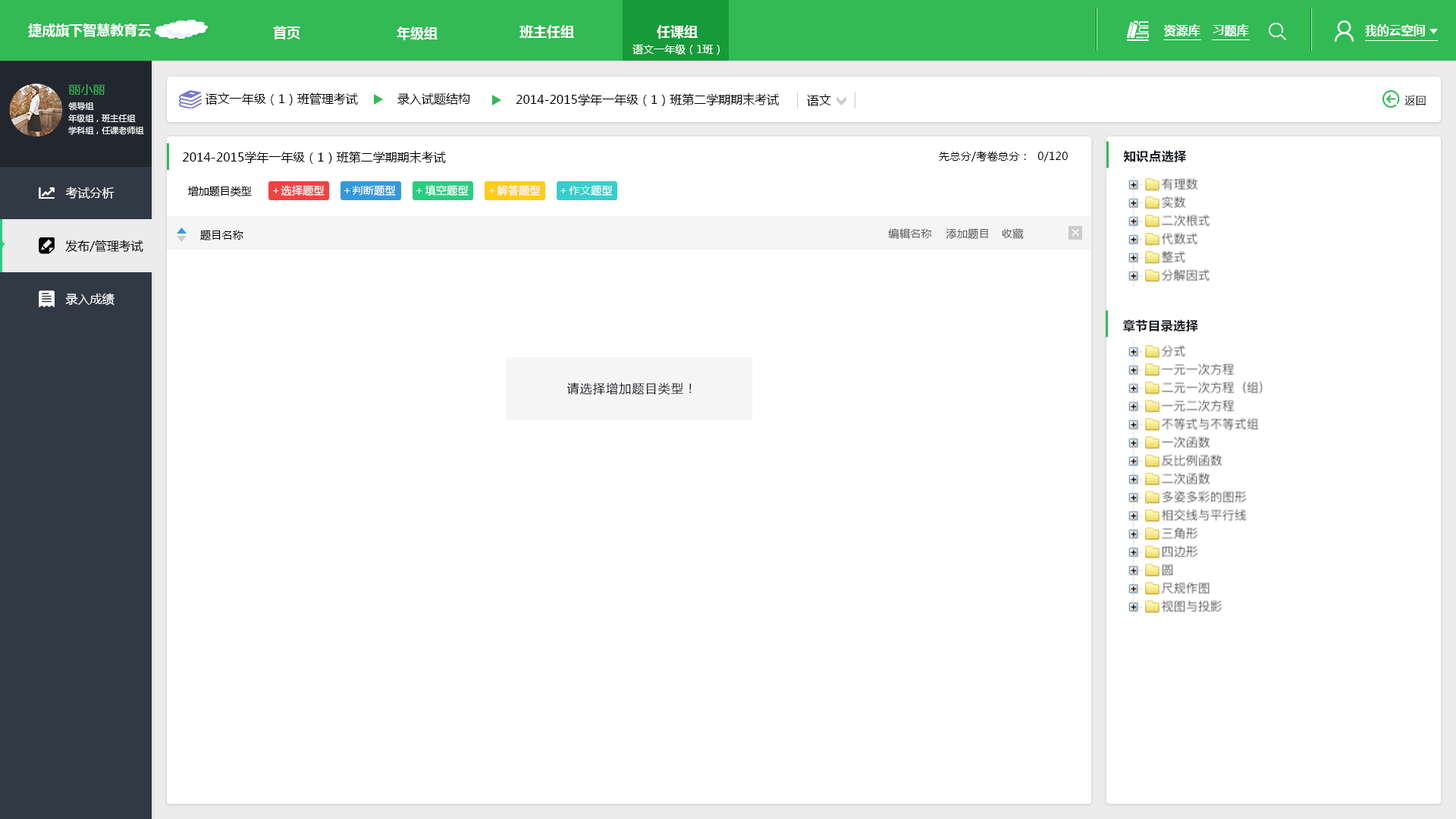
<style>
.page{position:relative;width:1456px;height:819px;background:#ffffff}
.page>*{position:absolute;margin:0}
.t1{font:13.6px "MicrosoftYaHei-Bold";color:#ffffff}
.t2{font:12.1px "MicrosoftYaHei-Bold";color:#ffffff}
.t3{font:10.6px "MicrosoftYaHei";color:#ffffff}
.t4{font:12.1px "MicrosoftYaHei";color:#32ba54}
.t5{font:12.1px "MicrosoftYaHei";color:#000000}
.t6{font:10.6px "MicrosoftYaHei";letter-spacing:0.04em;color:#000000}
.t7{font:8.3px/12.1px "MicrosoftYaHei";color:#ffffff}
.t8{font:10.6px "MicrosoftYaHei";letter-spacing:0.025em;color:#000000}
.t9{font:12.1px "MicrosoftYaHei-Bold";letter-spacing:0.04em;color:#171a21}
.t10{font:10.6px "MicrosoftYaHei";color:#000000}
.t11{font:10.6px "MicrosoftYaHei";letter-spacing:0.025em;color:#ffffff}
.t12{font:12.1px "MicrosoftYaHei";color:#ffffff}
.t13{font:10.6px "MicrosoftYaHei";letter-spacing:0.025em;color:#606060}
.t14{font:15.2px "MicrosoftYaHei";letter-spacing:0.025em;color:#ffffff}
.t15{font:12.1px "MicrosoftYaHei";letter-spacing:0.075em;color:#171a21}
</style>
<div class="page">
<p class="t1" style="left:28px;top:24px;width:123px;height:13px">捷成旗下智慧教育云</p>
<p class="t1" style="left:273px;top:26px;width:27px;height:13px">首页</p>
<p class="t1" style="left:397px;top:27px;width:41px;height:13px">年级组</p>
<p class="t1" style="left:519px;top:25px;width:55px;height:14px">班主任组</p>
<p class="t1" style="left:657px;top:25px;width:41px;height:14px">任课组</p>
<p class="t2" style="left:1164px;top:24px;width:36px;height:13px">资源库</p>
<p class="t2" style="left:1213px;top:24px;width:36px;height:13px">习题库</p>
<p class="t2" style="left:1365px;top:24px;width:60px;height:12px">我的云空间</p>
<p class="t3" style="left:632px;top:44px;width:88px;height:11px">语文一年级（1班）</p>
<p class="t4" style="left:68px;top:84px;width:37px;height:11px">丽小丽</p>
<p class="t5" style="left:206px;top:93px;width:152px;height:12px">语文一年级（1）班管理考试</p>
<p class="t5" style="left:397px;top:93px;width:73px;height:12px">录入试题结构</p>
<p class="t5" style="left:516px;top:93px;width:263px;height:13px">2014-2015学年一年级（1）班第二学期期末考试</p>
<p class="t5" style="left:807px;top:94px;width:24px;height:12px">语文</p>
<p class="t6" style="left:1404px;top:95px;width:22px;height:10px">返回</p>
<p class="t7" style="left:68px;top:102px;width:76px;height:33px">领导组<br>年级组，班主任组<br>学科组，任课老师组</p>
<p class="t5" style="left:183px;top:151px;width:263px;height:13px">2014-2015学年一年级（1）班第二学期期末考试</p>
<p class="t8" style="left:939px;top:151px;width:129px;height:11px">先总分/考卷总分：  0/120</p>
<p class="t9" style="left:1124px;top:150px;width:62px;height:12px">知识点选择</p>
<p class="t10" style="left:187px;top:186px;width:65px;height:11px">增加题目类型</p>
<p class="t11" style="left:281px;top:185px;width:44px;height:11px">选择题型</p>
<p class="t11" style="left:352px;top:185px;width:44px;height:11px">判断题型</p>
<p class="t11" style="left:425px;top:185px;width:44px;height:11px">填空题型</p>
<p class="t11" style="left:497px;top:185px;width:44px;height:11px">解答题型</p>
<p class="t11" style="left:569px;top:185px;width:44px;height:11px">作文题型</p>
<p class="t12" style="left:65px;top:187px;width:50px;height:12px">考试分析</p>
<p class="t11" style="left:273px;top:188px;width:6px;height:5px">＋</p>
<p class="t11" style="left:344px;top:188px;width:6px;height:5px">＋</p>
<p class="t11" style="left:416px;top:188px;width:6px;height:5px">＋</p>
<p class="t11" style="left:489px;top:188px;width:6px;height:5px">＋</p>
<p class="t11" style="left:560px;top:188px;width:6px;height:5px">＋</p>
<p class="t8" style="left:200px;top:230px;width:43px;height:10px">题目名称</p>
<p class="t13" style="left:888px;top:228px;width:44px;height:11px">编辑名称</p>
<p class="t13" style="left:946px;top:228px;width:42px;height:11px">添加题目</p>
<p class="t13" style="left:1002px;top:228px;width:22px;height:12px">收藏</p>
<p class="t14" style="left:1072px;top:229px;width:7px;height:7px">×</p>
<p class="t5" style="left:65px;top:240px;width:78px;height:13px">发布/管理考试</p>
<p class="t12" style="left:65px;top:293px;width:50px;height:13px">录入成绩</p>
<p class="t9" style="left:1123px;top:319px;width:75px;height:13px">章节目录选择</p>
<p class="t15" style="left:567px;top:382px;width:125px;height:13px">请选择增加题目类型！</p>
</div>
